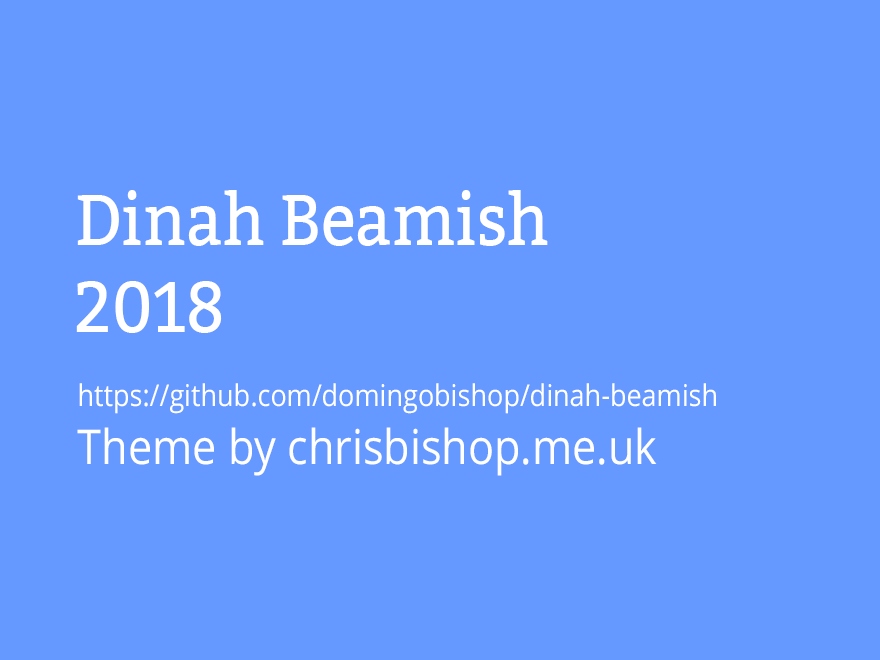
<style>
.page{position:relative;width:880px;height:660px;background:#6699ff}
.page>*{position:absolute;margin:0}
.t1{font:72px "Bitter-Regular";color:#ffffff;scale:0.9 1}
.t2{font:30px "OpenSans";color:#ffffff;scale:0.9 1}
.t3{font:48px "OpenSans";color:#ffffff;scale:0.9 1}
</style>
<div class="page">
<p class="t1" style="left:76px;top:190px;width:472px;height:143px">Dinah Beamish <br>2018</p>
<p class="t2" style="left:77px;top:383px;width:639px;height:93px">https://github.com/domingobishop/dinah-beamish<br><span class="t3">Theme by chrisbishop.me.uk</span></p>
</div>
